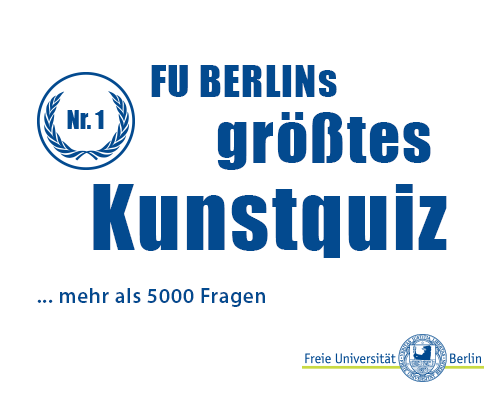
<style>
.page{position:relative;width:500px;height:400px;background:#ffffff}
.page>*{position:absolute;margin:0}
.t1{font:40.8px "Impact";letter-spacing:0.033em;color:#034a8f}
.t2{font:63px "Impact";letter-spacing:0.033em;color:#034a8f}
.t3{font:83.2px "Impact";letter-spacing:0.033em;color:#034a8f}
.t4{font:21px "MyriadPro-Semibold";letter-spacing:0.033em;color:#034a8f}
</style>
<div class="page">
<p class="t1" style="left:151px;top:65px;width:186px;height:32px">FU BERLINs</p>
<p class="t2" style="left:217px;top:112px;width:214px;height:58px">größtes</p>
<p class="t3" style="left:93px;top:184px;width:354px;height:74px">Kunstquiz</p>
<p class="t4" style="left:37px;top:288px;width:228px;height:19px">... mehr als 5000 Fragen</p>
</div>
